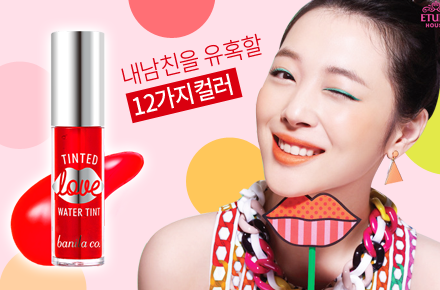
<style>
.page{position:relative;width:440px;height:290px;background:#ffe0e9}
.page>*{position:absolute;margin:0}
.t1{font:24px "NotoSansCJKkr-Light";letter-spacing:-0.05em;color:#dc0011;scale:0.95 1}
.t2{font:24px "NotoSansCJKkr-Medium";letter-spacing:-0.05em;color:#ffffff;scale:0.95 1}
</style>
<div class="page">
<p class="t1" style="left:121px;top:33px;width:141px;height:51px;rotate:-13deg">내남친을 유혹할</p>
<p class="t2" style="left:132px;top:73px;width:102px;height:43px;rotate:-13deg">12가지컬러</p>
</div>
